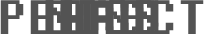
<style>
.page{position:relative;width:204px;height:34px;background:#535353}
.page>*{position:absolute;margin:0}
.t1{font:60.1px "Fixedsys";color:#535353}
.t2{font:60px "Fixedsys";color:#535353}
</style>
<div class="page">
<p class="t1" style="left:0px;top:0px;width:204px;height:34px">PERFECT</p>
<p class="t1" style="left:45px;top:0px;width:114px;height:34px">NICE</p>
<p class="t1" style="left:45px;top:0px;width:114px;height:34px">GOOD</p>
<p class="t2" style="left:45px;top:0px;width:114px;height:34px">MISS</p>
<p class="t1" style="left:60px;top:0px;width:84px;height:34px">BAD</p>
</div>
